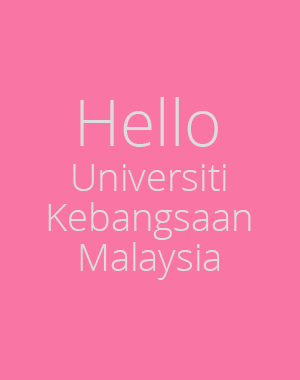
<style>
.page{position:relative;width:300px;height:380px;background:#f976a4}
.page>*{position:absolute;margin:0}
.t1{font:64px "OpenSans-Light";color:#dcdcdc}
.t2{font:38px/40px "OpenSans-Light";color:#dcdcdc}
</style>
<div class="page">
<p class="t1" style="left:80px;top:97px;width:138px;height:50px">Hello</p>
<p class="t2" style="left:48px;top:164px;width:203px;height:116px;text-align:center">Universiti<br>Kebangsaan<br>Malaysia</p>
</div>
